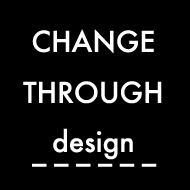
<style>
.page{position:relative;width:190px;height:190px;background:#000000}
.page>*{position:absolute;margin:0}
.t1{font:28px "Futura-Medium";color:#ffffff}
.t2{font:25.1px "Futura-Medium";color:#ffffff}
</style>
<div class="page">
<p class="t1" style="left:23px;top:29px;width:139px;height:75px;text-align:center">CHANGE<br><br>THROUGH</p>
<p class="t1" style="left:23px;top:29px;width:139px;height:75px;text-align:center">CHANGE<br><br>THROUGH</p>
<p class="t1" style="left:53px;top:128px;width:80px;height:32px">design</p>
<p class="t2" style="left:10px;top:163px;width:169px;height:4px">_ _ _ _ _ _ _ _</p>
<p class="t2" style="left:32px;top:163px;width:125px;height:4px">_ _ _ _ _ _</p>
</div>
